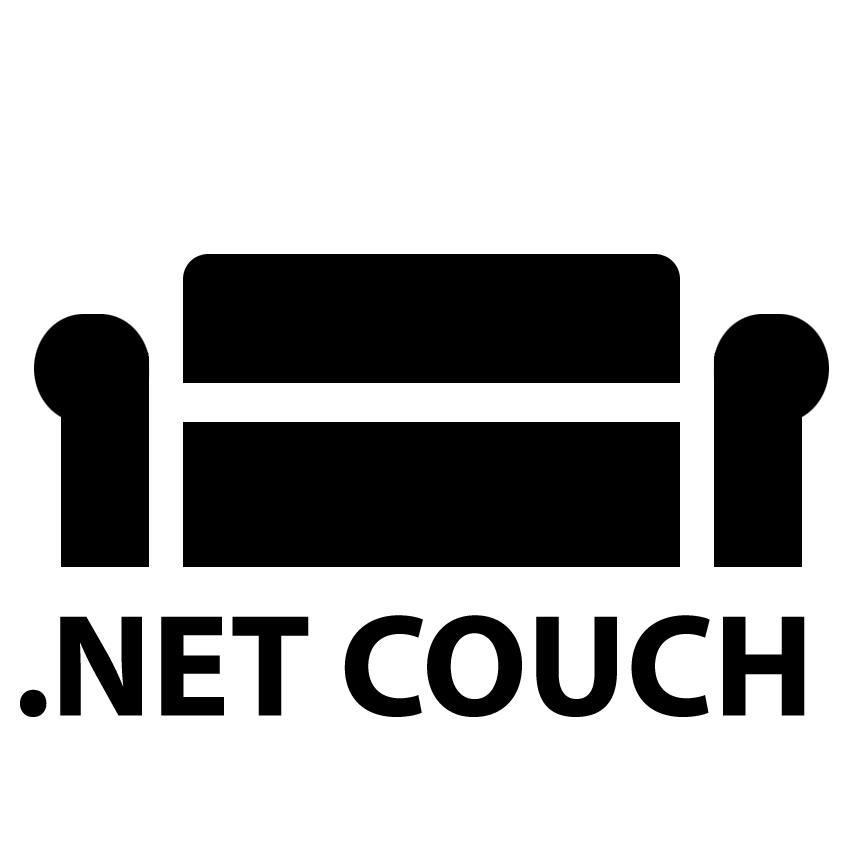
<style>
.page{position:relative;width:850px;height:850px;background:#ffffff}
.page>*{position:absolute;margin:0}
.t1{font:146px "MyriadPro-Bold";color:#000000}
</style>
<div class="page">
<p class="t1" style="left:20px;top:615px;width:785px;height:102px">.NET COUCH</p>
</div>
